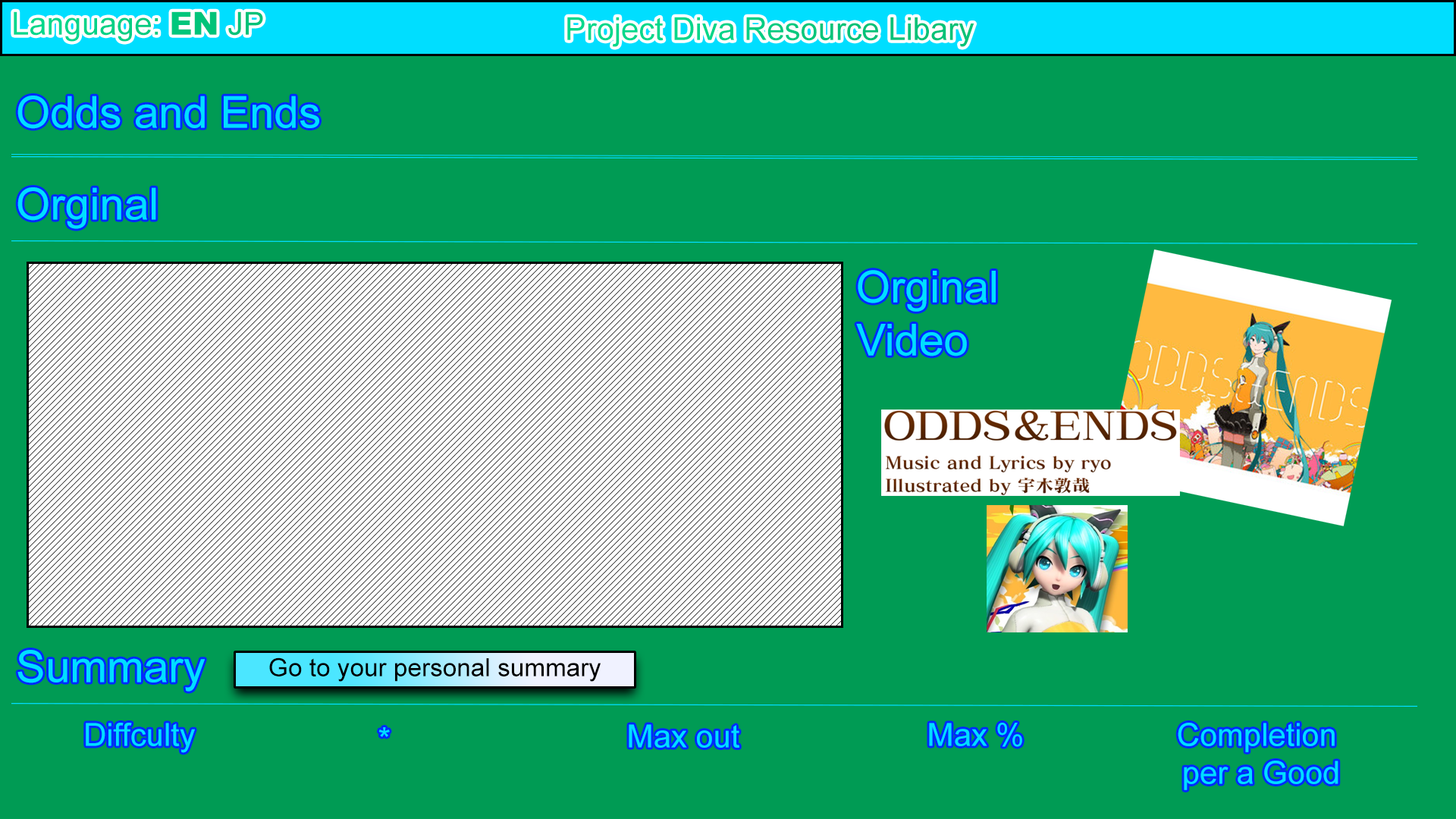
<style>
.page{position:relative;width:1456px;height:819px;background:#009b54}
.page>*{position:absolute;margin:0}
.t1{font:31.6px "ArialMT";color:#00c77d}
.t2{font:31.6px "Arial-Black";color:#00c77d}
.t3{font:31.6px "ArialMT";color:#00ce83}
.t4{font:44.2px "ArialMT";color:#00deff}
.t5{font:25.3px "ArialMT";color:#000000}
.t6{font:31.6px "ArialMT";color:#00deff}
</style>
<div class="page">
<p class="t1" style="left:14px;top:11px;width:249px;height:31px">Language: <span class="t2">EN</span> JP</p>
<p class="t3" style="left:567px;top:17px;width:407px;height:30px">Project Diva Resource Libary</p>
<p class="t4" style="left:17px;top:96px;width:302px;height:33px">Odds and Ends</p>
<p class="t4" style="left:17px;top:187px;width:139px;height:42px">Orginal</p>
<p class="t4" style="left:856px;top:270px;width:140px;height:86px">Orginal<br>Video</p>
<p class="t4" style="left:17px;top:650px;width:188px;height:42px">Summary</p>
<p class="t5" style="left:269px;top:657px;width:332px;height:25px">Go to your personal summary</p>
<p class="t6" style="left:86px;top:723px;width:109px;height:30px">Diffculty</p>
<p class="t6" style="left:629px;top:724px;width:110px;height:24px">Max out</p>
<p class="t6" style="left:929px;top:723px;width:93px;height:24px">Max %</p>
<p class="t6" style="left:1178px;top:723px;width:160px;height:67px;text-align:center">Completion<br> per a Good</p>
<p class="t6" style="left:378px;top:727px;width:12px;height:10px">*</p>
</div>
